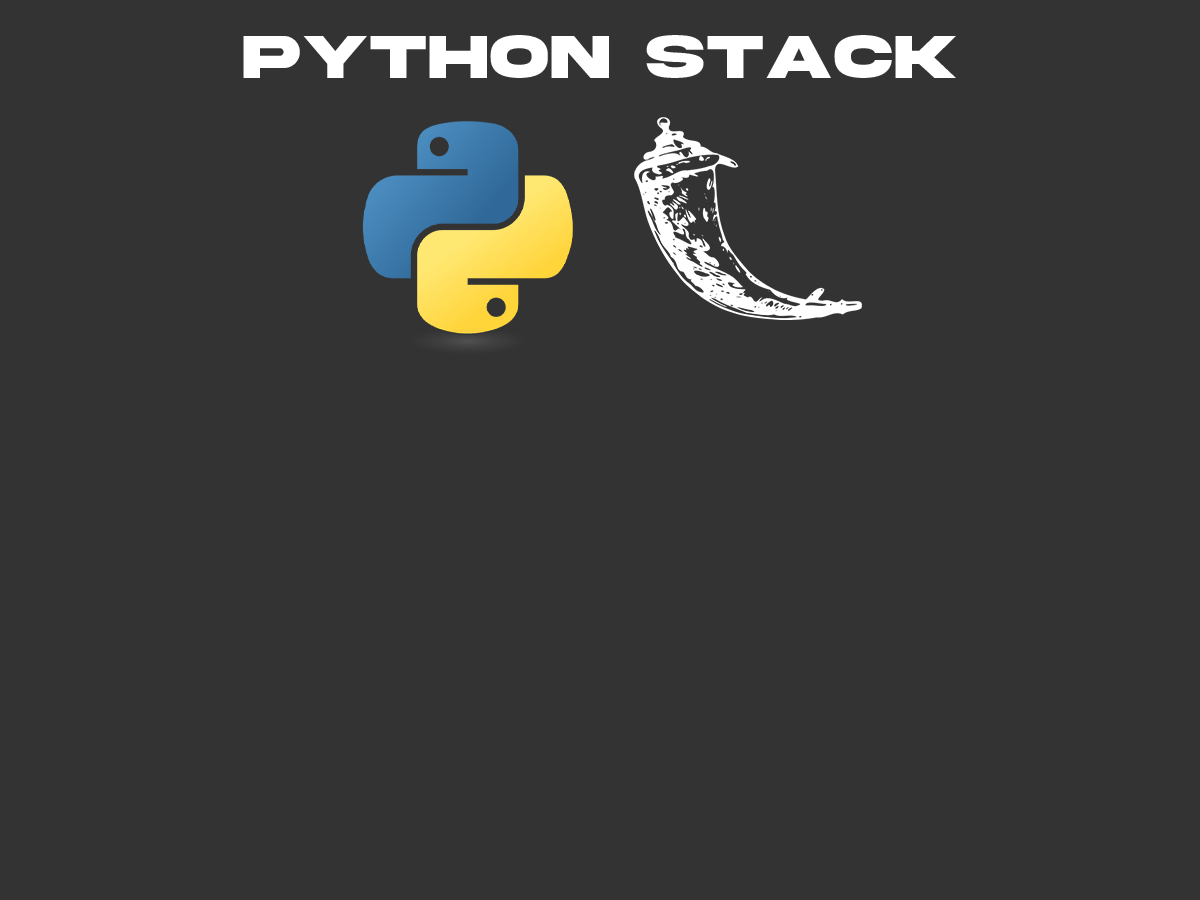
<style>
.page{position:relative;width:1200px;height:900px;background:#333333}
.page>*{position:absolute;margin:0}
.t1{font:63.9px "AkiraExpanded-SuperBold";letter-spacing:0.04em;color:#ffffff}
</style>
<div class="page">
<p class="t1" style="left:243px;top:35px;width:713px;height:43px">PYTHON STACK</p>
</div>
